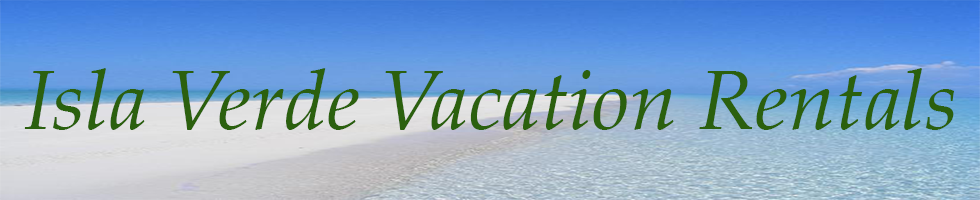
<style>
.page{position:relative;width:980px;height:200px}
.page>*{position:absolute;margin:0}
.t1{font:85px "PalatinoLinotype-Italic";color:#2b600e}
</style>
<div class="page">
<p class="t1" style="left:24px;top:68px;width:930px;height:62px">Isla Verde Vacation Rentals</p>
</div>
